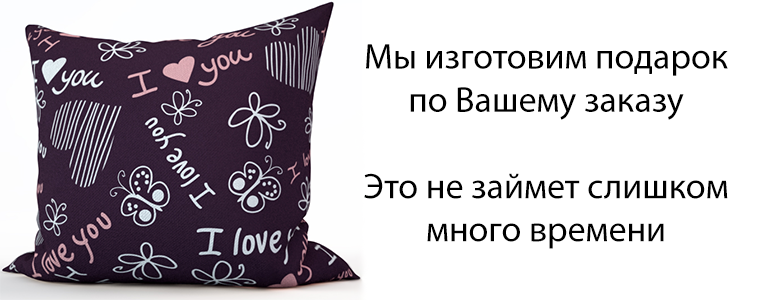
<style>
.page{position:relative;width:765px;height:300px;background:#ffffff}
.page>*{position:absolute;margin:0}
.t1{font:36px "MyriadPro-Regular";color:#000000}
</style>
<div class="page">
<p class="t1" style="left:364px;top:44px;width:364px;height:205px;text-align:center">Мы изготовим подарок по Вашему заказу<br><br>Это не займет слишком много времени</p>
</div>
